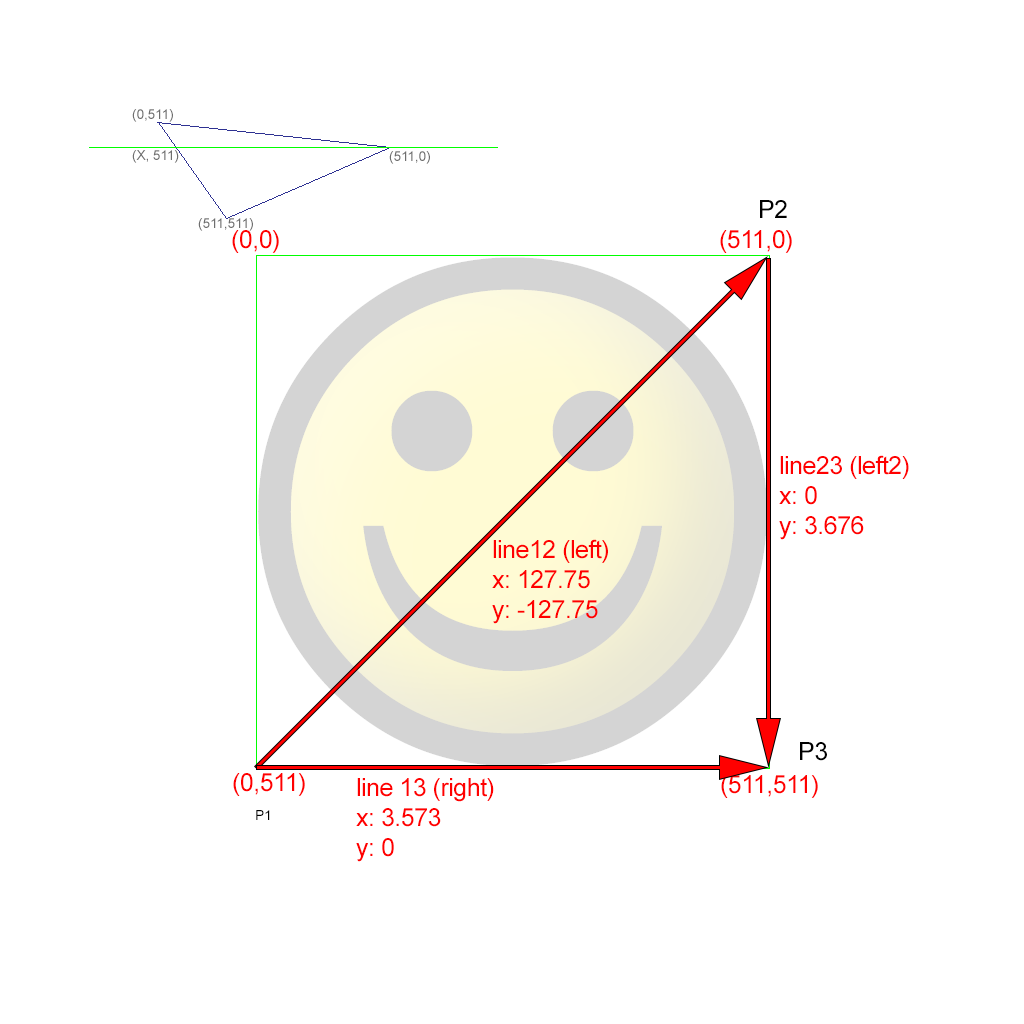
<style>
.page{position:relative;width:1024px;height:1024px;background:#ffffff}
.page>*{position:absolute;margin:0}
.t1{font:14px "ArialMT";letter-spacing:-0.02em;color:#6f6f6f}
.t2{font:25px "ArialMT";letter-spacing:-0.02em;color:#000000}
.t3{font:25px "ArialMT";letter-spacing:-0.02em;color:#ff0000}
.t4{font:14px "ArialMT";letter-spacing:-0.02em;color:#000000}
</style>
<div class="page">
<p class="t1" style="left:132px;top:109px;width:41px;height:13px">(0,511)</p>
<p class="t1" style="left:132px;top:150px;width:47px;height:13px">(X, 511)</p>
<p class="t1" style="left:389px;top:151px;width:41px;height:13px">(511,0)</p>
<p class="t2" style="left:760px;top:200px;width:27px;height:18px">P2</p>
<p class="t1" style="left:198px;top:218px;width:55px;height:13px">(511,511)</p>
<p class="t3" style="left:232px;top:230px;width:47px;height:23px">(0,0)</p>
<p class="t3" style="left:720px;top:230px;width:72px;height:23px">(511,0)</p>
<p class="t3" style="left:779px;top:455px;width:130px;height:85px">line23 (left2)<br>x: 0<br>y: 3.676</p>
<p class="t3" style="left:492px;top:539px;width:116px;height:85px">line12 (left)<br>x: 127.75<br>y: -127.75</p>
<p class="t2" style="left:800px;top:742px;width:27px;height:19px">P3</p>
<p class="t3" style="left:233px;top:773px;width:72px;height:23px">(0,511)</p>
<p class="t3" style="left:356px;top:778px;width:138px;height:84px">line 13 (right)<br>x: 3.573<br>y: 0</p>
<p class="t3" style="left:721px;top:775px;width:97px;height:23px">(511,511)</p>
<p class="t4" style="left:256px;top:810px;width:14px;height:10px">P1</p>
</div>
